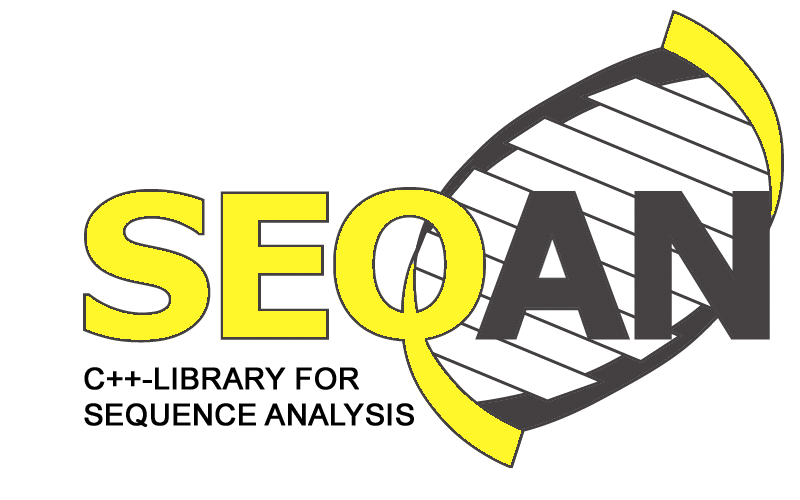
<style>
.page{position:relative;width:800px;height:500px;background:#ffffff}
.page>*{position:absolute;margin:0}
.t1{font:29.9px "ArialMT";color:#000000;font-weight:bold}
</style>
<div class="page">
<p class="t1" style="left:84px;top:367px;width:330px;height:60px">C++-LIBRARY FOR<br>SEQUENCE ANALYSIS</p>
</div>
